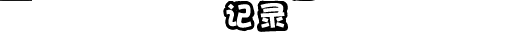
<style>
.page{position:relative;width:512px;height:32px;background:#ffffff}
.page>*{position:absolute;margin:0}
.t1{font:28px "DFPHaiBaoW12";letter-spacing:0.2em;color:#ffffff}
</style>
<div class="page">
<p class="t1" style="left:226px;top:3px;width:59px;height:26px">设置</p>
<p class="t1" style="left:226px;top:3px;width:59px;height:25px">记录</p>
</div>
